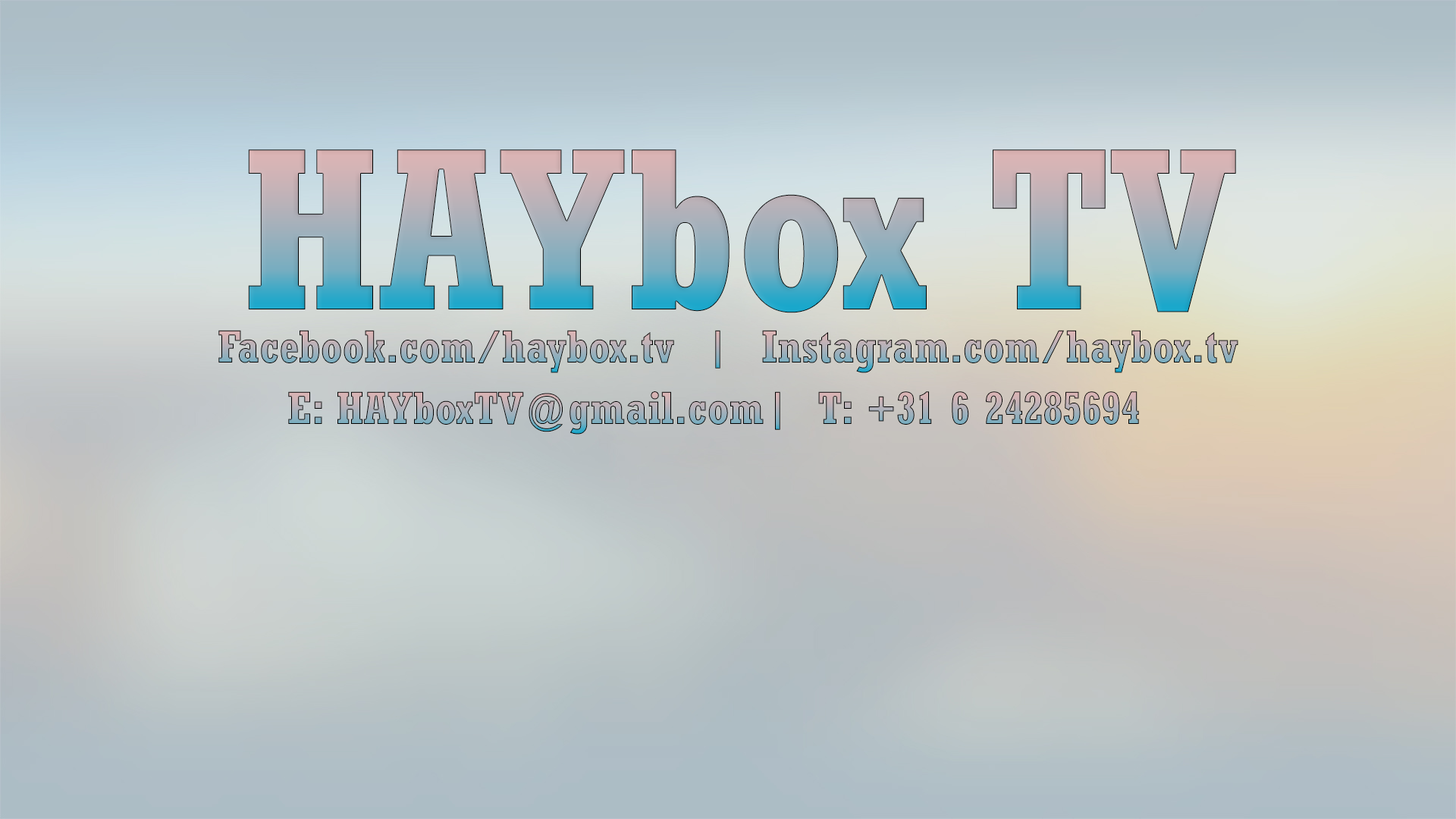
<style>
.page{position:relative;width:1456px;height:819px}
.page>*{position:absolute;margin:0}
.t1{font:227.4px "Rockwell-CondensedBold"}
.t2{font:45.5px "Rockwell-CondensedBold"}
</style>
<div class="page">
<p class="t1" style="left:248px;top:149px;width:988px;height:164px">HAYbox TV</p>
<p class="t2" style="left:218px;top:330px;width:1020px;height:43px">Facebook.com/haybox.tv  |  Instagram.com/haybox.tv</p>
<p class="t2" style="left:288px;top:391px;width:851px;height:44px">E: HAYboxTV@gmail.com|  T: +31 6 24285694</p>
</div>
